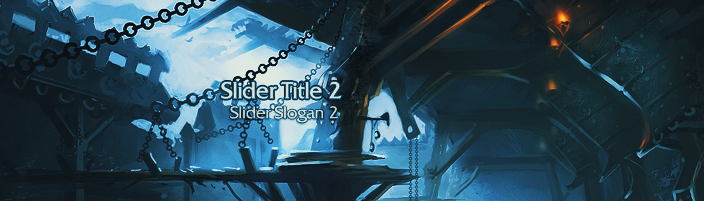
<style>
.page{position:relative;width:704px;height:201px}
.page>*{position:absolute;margin:0}
.t1{font:22.8px "BlizQuadrataWeb";color:#e2e2e2}
.t2{font:16.8px "BlizQuadrataWeb";color:#e2e2e2}
</style>
<div class="page">
<p class="t1" style="left:221px;top:82px;width:121px;height:17px">Slider Title 2</p>
<p class="t2" style="left:230px;top:106px;width:109px;height:17px;opacity:0.8">Slider Slogan 2</p>
</div>
